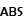
<style>
.page{position:relative;width:24px;height:24px;background:#ffffff}
.page>*{position:absolute;margin:0}
.t1{font:13.3px "BerlinSansFB-Reg";color:#000000}
</style>
<div class="page">
<p class="t1" style="left:0px;top:7px;width:23px;height:9px">ABS</p>
</div>
